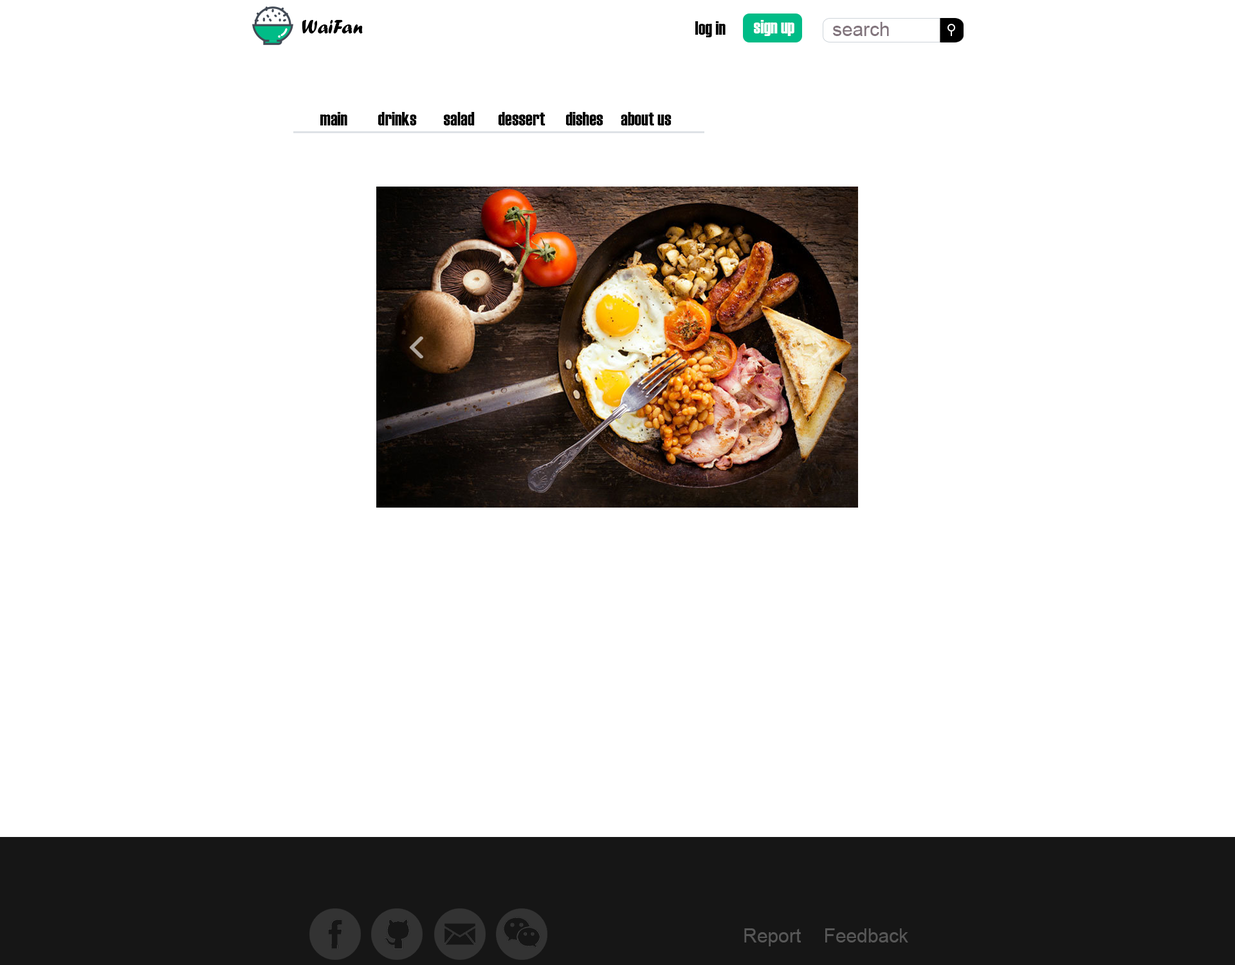
<style>
.page{position:relative;width:1235px;height:965px;background:#ffffff}
.page>*{position:absolute;margin:0}
.t1{font:19.3px "ForteMT";color:#000000}
.t2{font:19.3px "Haettenschweiler";color:#000000}
.t3{font:19.3px "Haettenschweiler";color:#ffffff}
.t4{font:19.3px "ArialMT";color:#82757d}
.t5{font:19.3px "ArialMT";color:#575757}
</style>
<div class="page">
<p class="t1" style="left:302px;top:20px;width:61px;height:13px">WaiFan</p>
<p class="t2" style="left:696px;top:21px;width:30px;height:16px">log in</p>
<p class="t3" style="left:754px;top:20px;width:41px;height:16px">sign up</p>
<p class="t4" style="left:833px;top:22px;width:56px;height:14px">search</p>
<p class="t2" style="left:320px;top:112px;width:27px;height:13px">main</p>
<p class="t2" style="left:378px;top:112px;width:39px;height:13px">drinks</p>
<p class="t2" style="left:444px;top:112px;width:31px;height:13px">salad</p>
<p class="t2" style="left:499px;top:112px;width:47px;height:13px">dessert</p>
<p class="t2" style="left:566px;top:112px;width:38px;height:13px">dishes</p>
<p class="t2" style="left:621px;top:112px;width:51px;height:13px">about us</p>
<p class="t5" style="left:744px;top:929px;width:57px;height:18px">Report</p>
<p class="t5" style="left:826px;top:929px;width:83px;height:14px">Feedback</p>
</div>
